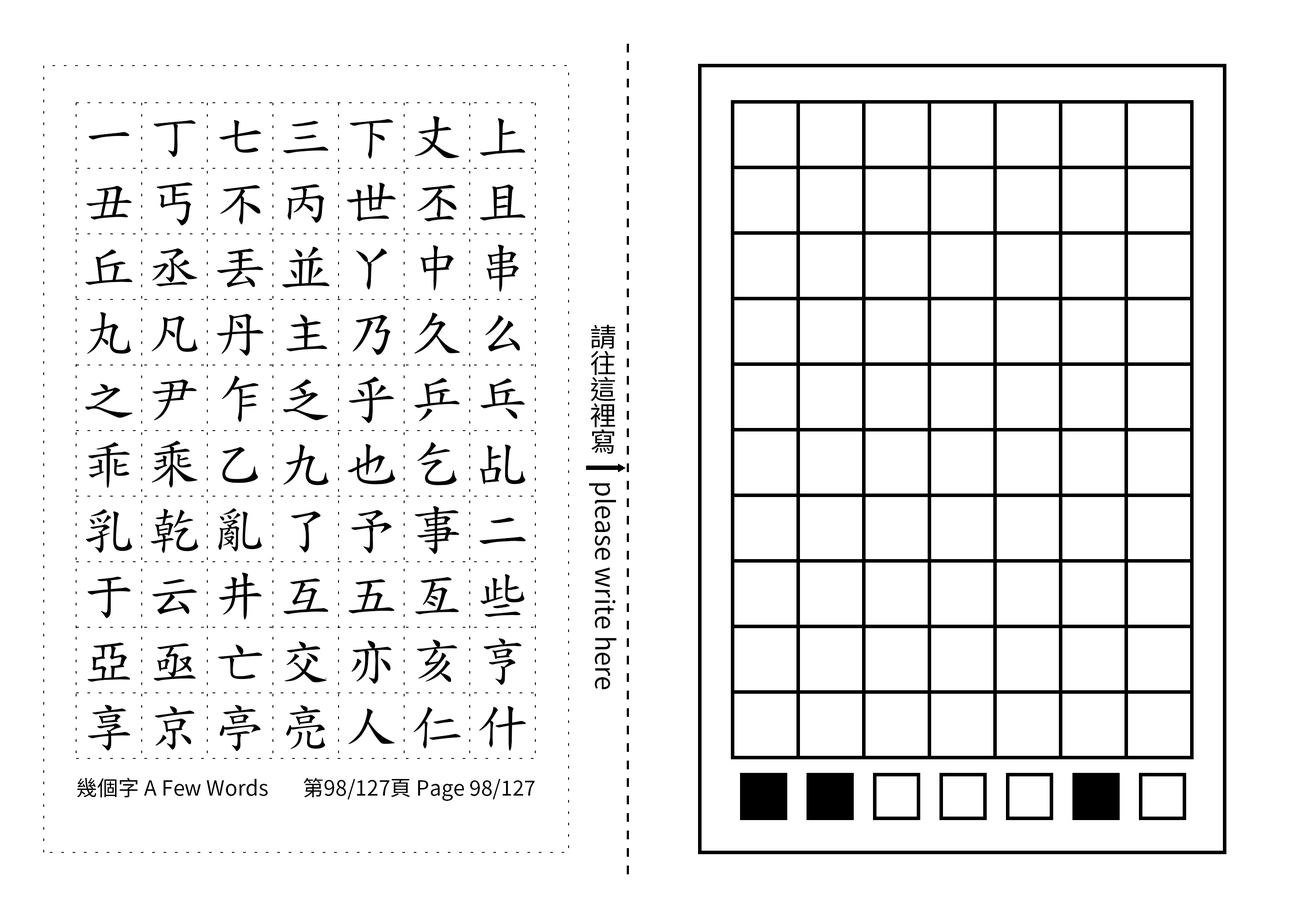
<style>
.page{position:relative;width:1299px;height:918px;background:#ffffff}
.page>*{position:absolute;margin:0}
.t1{font:52.5px/65.6px "TW-Kai-98_1";letter-spacing:0.25em;color:#000000}
.t2{font:26.2px "SourceHanSansTC-Regular";color:#000000}
.t3{font:21px "SourceHanSansTC-Regular";color:#000000}
</style>
<div class="page">
<p class="t1" style="left:85px;top:116px;width:441px;height:636px;text-align:center">一丁七三下丈上丑丐不丙世丕且丘丞丟並丫中串丸凡丹主乃久么之尹乍乏乎乒乓乖乘乙九也乞乩乳乾亂了予事二于云井互五亙些亞亟亡交亦亥亨享京亭亮人仁什</p>
<p class="t2" style="left:589px;top:324px;width:28px;height:366px;text-align:center">請往這裡寫　please write here</p>
<p class="t3" style="left:77px;top:778px;width:191px;height:20px">幾個字 A Few Words</p>
<p class="t3" style="left:303px;top:778px;width:232px;height:23px">第98/127頁 Page 98/127</p>
</div>
